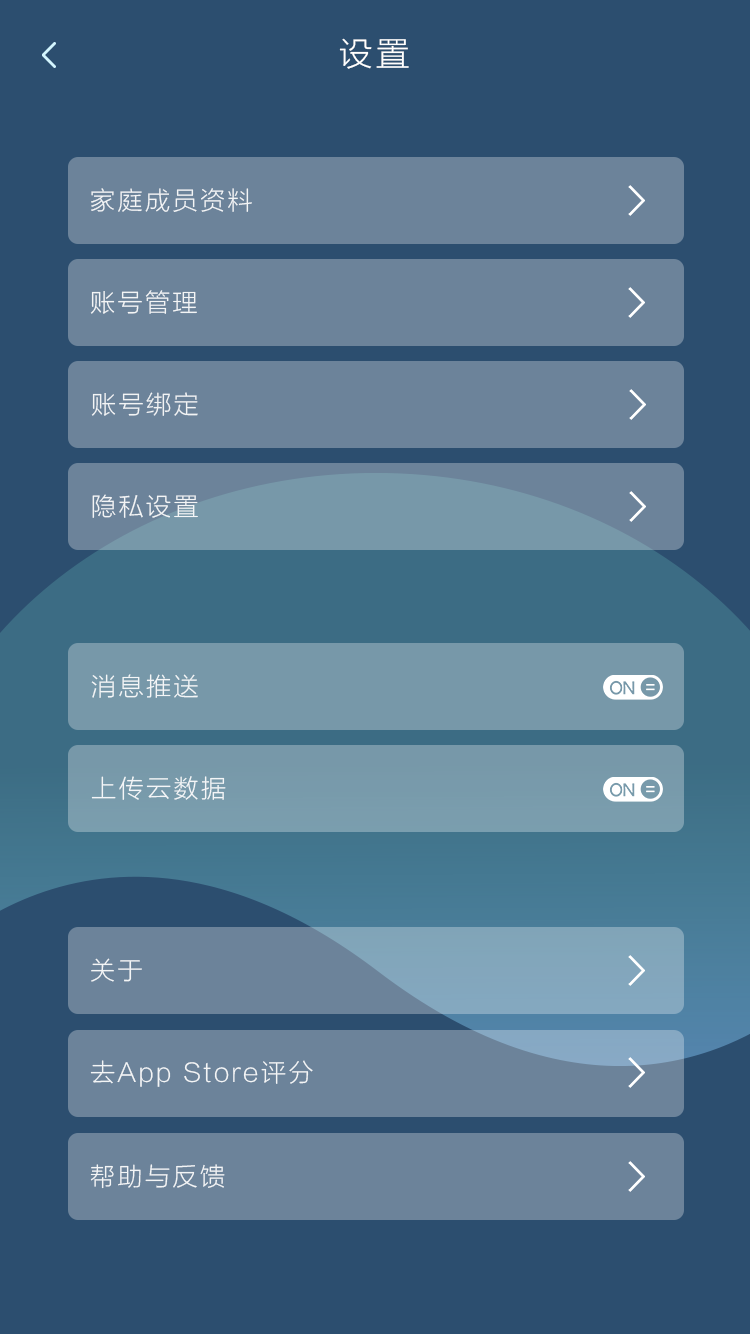
<style>
.page{position:relative;width:750px;height:1334px;background:#6c839a}
.page>*{position:absolute;margin:0}
.t1{font:33.3px "FZLTXHJW--GB1-0";letter-spacing:0.1em;color:#ffffff}
.t2{font:25px "FZLTXHJW--GB1-0";letter-spacing:0.1em;color:#ffffff}
.t3{font:25px "FZLTXHJW--GB1-0";letter-spacing:0.1em;color:#fefefe}
</style>
<div class="page">
<p class="t1" style="left:339px;top:38px;width:70px;height:31px">设置</p>
<p class="t2" style="left:91px;top:188px;width:161px;height:24px;opacity:0.9">家庭成员资料</p>
<p class="t2" style="left:90px;top:290px;width:107px;height:24px;opacity:0.9">账号管理</p>
<p class="t3" style="left:91px;top:392px;width:107px;height:24px;opacity:0.9">账号绑定</p>
<p class="t2" style="left:92px;top:494px;width:106px;height:24px;opacity:0.9">隐私设置</p>
<p class="t2" style="left:91px;top:674px;width:107px;height:24px;opacity:0.9">消息推送</p>
<p class="t2" style="left:91px;top:776px;width:135px;height:24px;opacity:0.9">上传云数据</p>
<p class="t2" style="left:91px;top:958px;width:51px;height:24px;opacity:0.9">关于</p>
<p class="t2" style="left:90px;top:1060px;width:223px;height:27px;opacity:0.9">去App Store评分</p>
<p class="t2" style="left:90px;top:1164px;width:135px;height:25px;opacity:0.9">帮助与反馈</p>
</div>
